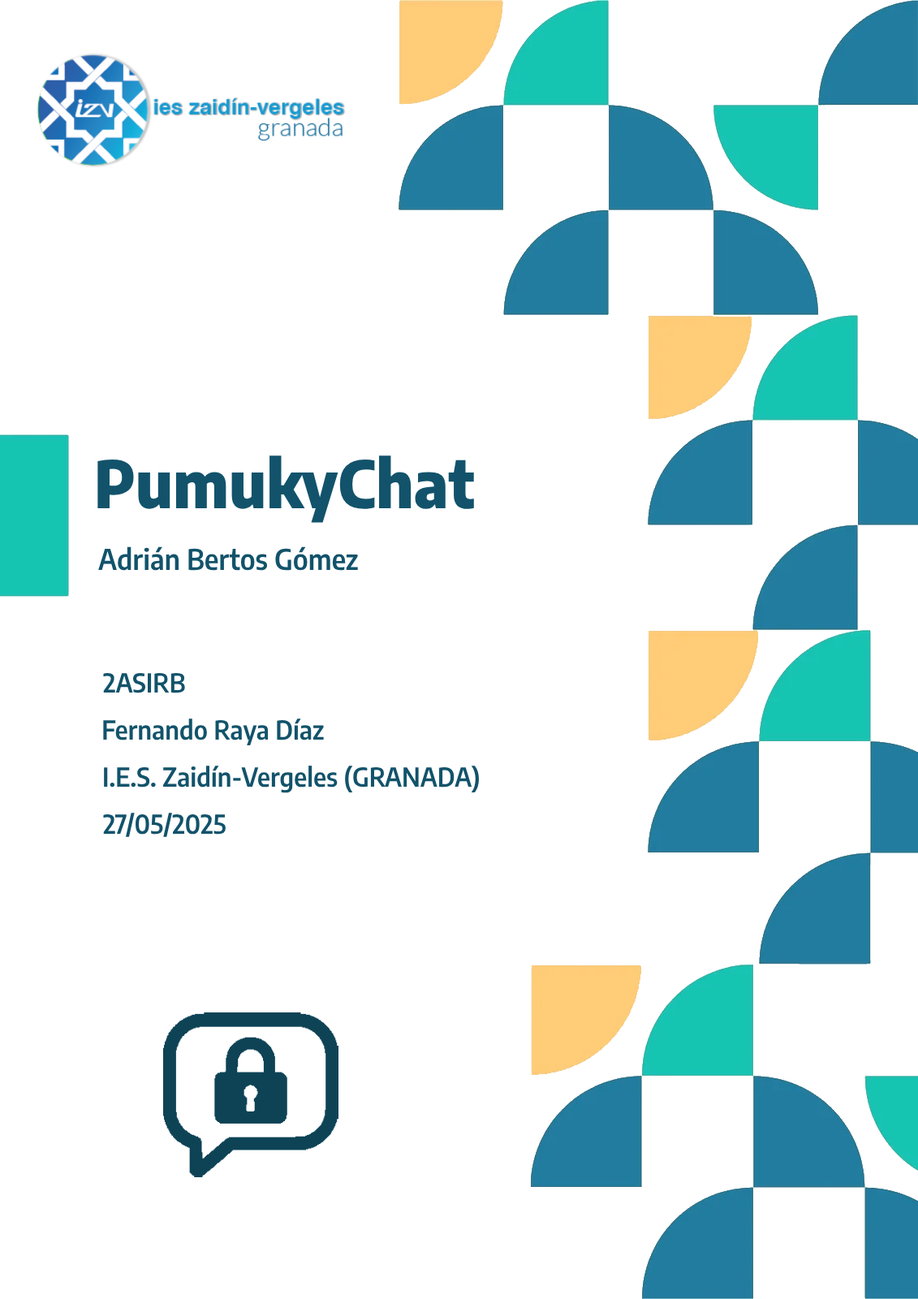
<style>
.page{position:relative;width:918px;height:1299px;background:#ffffff}
.page>*{position:absolute;margin:0}
.t1{font:64.9px "EncodeSansSemiCondensed-ExtraBold";color:#12536b}
.t2{font:28.4px "EncodeSansSemiCondensed-SemiBold";color:#12536b}
.t3{font:26px "EncodeSansSemiCondensed-SemiBold";color:#12536b}
</style>
<div class="page">
<p class="t1" style="left:97px;top:455px;width:377px;height:68px">PumukyChat</p>
<p class="t2" style="left:98px;top:546px;width:260px;height:25px">Adrián Bertos Gómez</p>
<p class="t3" style="left:103px;top:673px;width:82px;height:20px">2ASIRB</p>
<p class="t3" style="left:103px;top:718px;width:221px;height:28px">Fernando Raya Díaz</p>
<p class="t3" style="left:104px;top:765px;width:375px;height:28px">I.E.S. Zaidín-Vergeles (GRANADA)</p>
<p class="t3" style="left:103px;top:813px;width:123px;height:24px">27/05/2025</p>
</div>
